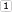
<style>
.page{position:relative;width:12px;height:12px;background:#ffffff}
.page>*{position:absolute;margin:0}
.t1{font:9.3px "Verdana";color:#000000}
</style>
<div class="page">
<p class="t1" style="left:4px;top:2px;width:4px;height:7px">1</p>
</div>
